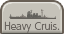
<style>
.page{position:relative;width:64px;height:34px;background:#c5c2b9}
.page>*{position:absolute;margin:0}
.t1{font:10px "UDShinGoPro-Light";color:#6a6560;scale:0.9 1}
</style>
<div class="page">
<p class="t1" style="left:4px;top:21px;width:56px;height:12px">Heavy Cruis.</p>
</div>
